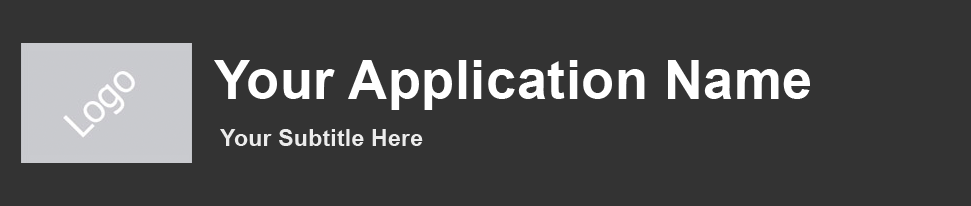
<style>
.page{position:relative;width:971px;height:206px;background:#333333}
.page>*{position:absolute;margin:0}
.t1{font:54px "Arial-BoldMT";letter-spacing:0.01em;color:#ffffff}
.t2{font:23px "Arial-BoldMT";letter-spacing:0.01em;color:#ececec}
</style>
<div class="page">
<p class="t1" style="left:214px;top:60px;width:596px;height:50px">Your Application Name</p>
<p class="t2" style="left:220px;top:129px;width:203px;height:17px">Your Subtitle Here</p>
</div>
